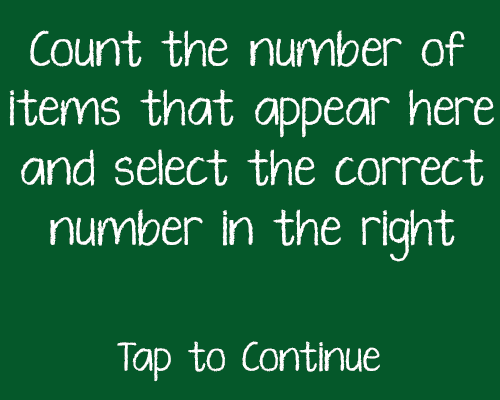
<style>
.page{position:relative;width:500px;height:400px;background:#05582a}
.page>*{position:absolute;margin:0}
.t1{font:36px/60px "KGTenThousandReasonsAlt";color:#ffffff}
.t2{font:30px "KGTenThousandReasonsAlt";color:#ffffff}
</style>
<div class="page">
<p class="t1" style="left:9px;top:30px;width:485px;height:232px;text-align:center">Count  the  number  of <br>items  that  appear  here<br>and  select  the  correct<br>number  in  the  right</p>
<p class="t2" style="left:117px;top:341px;width:263px;height:41px">Tap  to  Continue</p>
</div>
